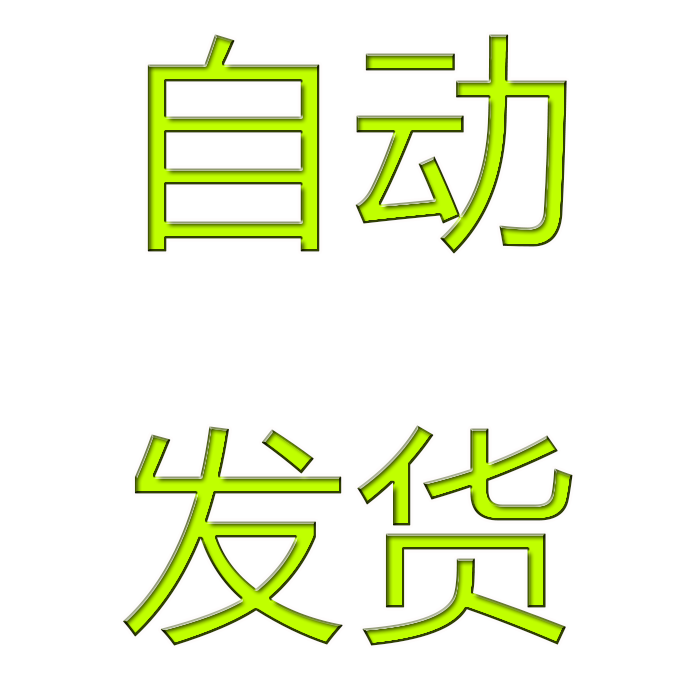
<style>
.page{position:relative;width:700px;height:700px;background:#ffffff}
.page>*{position:absolute;margin:0}
.t1{font:224.6px "MicrosoftYaHei";font-weight:bold}
</style>
<div class="page">
<p class="t1" style="left:122px;top:34px;width:451px;height:612px">自动<br>发货</p>
</div>
